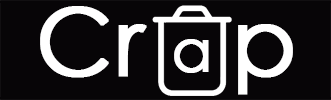
<style>
.page{position:relative;width:331px;height:100px;background:#070507}
.page>*{position:absolute;margin:0}
.t1{font:94.1px "CenturyGothic";color:#ffffff;font-weight:bold}
.t2{font:58.8px "CenturyGothic";color:#ffffff;font-weight:bold}
</style>
<div class="page">
<p class="t1" style="left:40px;top:6px;width:253px;height:89px">Cr   p</p>
<p class="t2" style="left:174px;top:39px;width:35px;height:34px">a</p>
</div>
